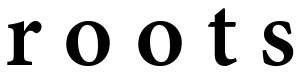
<style>
.page{position:relative;width:300px;height:80px;background:#ffffff}
.page>*{position:absolute;margin:0}
.t1{font:105px "AdobeGurmukhi-Bold";color:#000000}
</style>
<div class="page">
<p class="t1" style="left:7px;top:8px;width:287px;height:59px">r o o t s</p>
</div>
